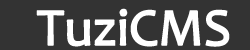
<style>
.page{position:relative;width:250px;height:50px;background:#333333}
.page>*{position:absolute;margin:0}
.t1{font:53.3px "Candara";letter-spacing:-0.025em;color:#ffffff;font-weight:bold}
</style>
<div class="page">
<p class="t1" style="left:36px;top:8px;width:194px;height:39px">TuziCMS</p>
</div>
